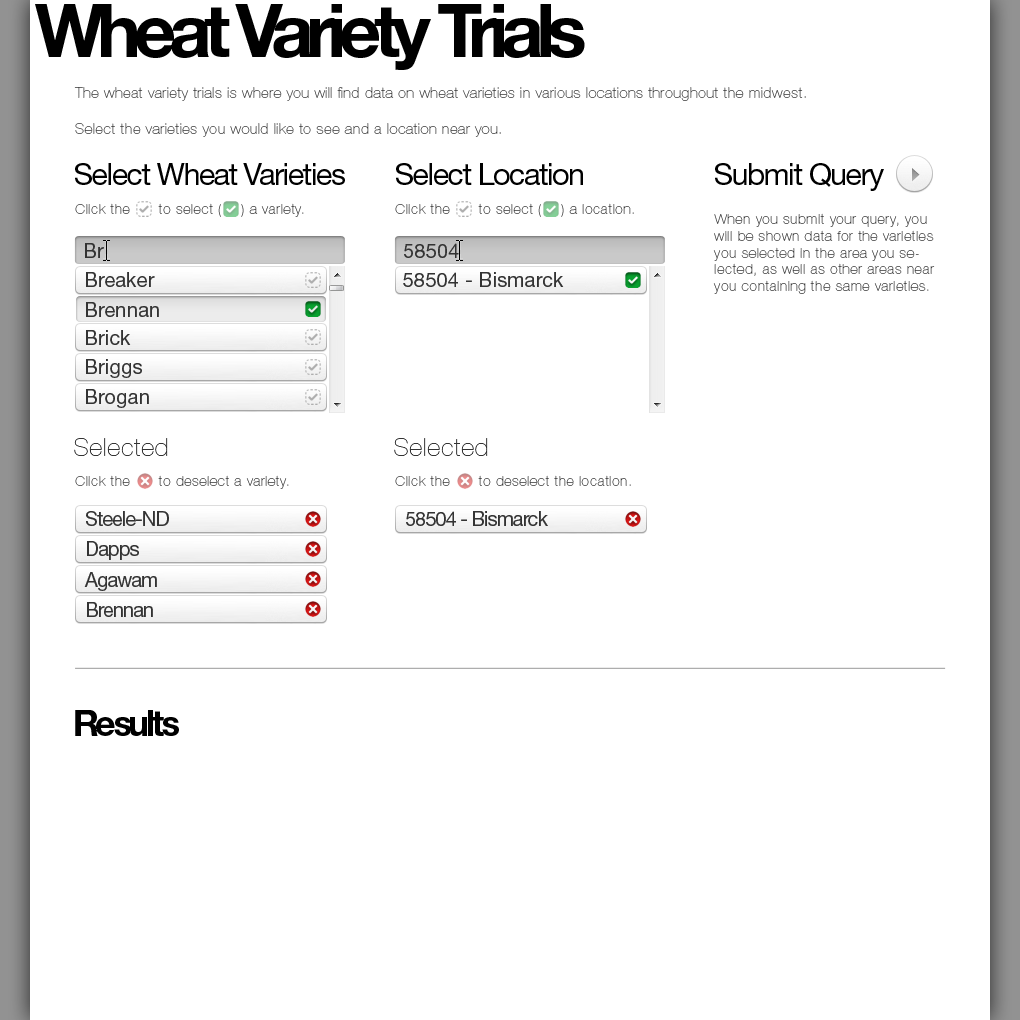
<style>
.page{position:relative;width:1020px;height:1020px;background:#ffffff}
.page>*{position:absolute;margin:0}
.t1{font:73.9px "HelveticaNeueLTStd-Bd";letter-spacing:-0.1em;color:#000000}
.t2{font:15px "HelveticaNeueLTStd-UltLt";letter-spacing:0.04em}
.t3{font:30.6px "HelveticaNeueLTStd-Roman";letter-spacing:-0.05em;color:#000000}
.t4{font:14px "HelveticaNeueLTStd-UltLt";letter-spacing:0.06em}
.t5{font:20px "HelveticaNeueLTStd-Roman";letter-spacing:0.01em;color:#333333}
.t6{font:25px "HelveticaNeueLTStd-UltLt";letter-spacing:0.04em;color:#333333}
.t7{font:20px "HelveticaNeueLTStd-Roman";letter-spacing:-0.05em;color:#333333}
.t8{font:36px "HelveticaNeueLTStd-Bd";letter-spacing:-0.1em;color:#000000}
</style>
<div class="page">
<p class="t1" style="left:35px;top:4px;width:550px;height:66px">Wheat Variety Trials</p>
<p class="t2" style="left:74px;top:87px;width:732px;height:50px">The wheat variety trials is where you will find data on wheat varieties in various locations throughout the midwest.<br><br>Select the varieties you would like to see and a location near you.</p>
<p class="t3" style="left:75px;top:163px;width:270px;height:22px">Select Wheat Varieties</p>
<p class="t3" style="left:396px;top:163px;width:187px;height:22px">Select Location</p>
<p class="t3" style="left:715px;top:163px;width:169px;height:28px">Submit Query</p>
<p class="t4" style="left:75px;top:203px;width:229px;height:14px">Click the      to select (    ) a variety.</p>
<p class="t4" style="left:395px;top:203px;width:239px;height:14px">Click the      to select (    ) a location.</p>
<p class="t4" style="left:713px;top:213px;width:222px;height:81px">When you submit your query, you will be shown data for the varieties you selected in the area you selected, as well as other areas near you containing the same varieties.</p>
<p class="t5" style="left:85px;top:243px;width:19px;height:15px">Br</p>
<p class="t5" style="left:404px;top:243px;width:55px;height:15px">58504</p>
<p class="t5" style="left:86px;top:272px;width:69px;height:15px">Breaker</p>
<p class="t5" style="left:403px;top:272px;width:161px;height:15px">58504 - Bismarck</p>
<p class="t5" style="left:86px;top:302px;width:73px;height:15px">Brennan</p>
<p class="t5" style="left:86px;top:330px;width:45px;height:15px">Brick</p>
<p class="t5" style="left:86px;top:359px;width:56px;height:19px">Briggs</p>
<p class="t5" style="left:86px;top:389px;width:63px;height:19px">Brogan</p>
<p class="t6" style="left:74px;top:438px;width:94px;height:18px">Selected</p>
<p class="t6" style="left:394px;top:438px;width:94px;height:18px">Selected</p>
<p class="t4" style="left:75px;top:475px;width:214px;height:14px">Click the      to deselect a variety.</p>
<p class="t4" style="left:395px;top:475px;width:236px;height:11px">Click the      to deselect the location.</p>
<p class="t7" style="left:86px;top:511px;width:83px;height:15px">Steele-ND</p>
<p class="t7" style="left:406px;top:511px;width:142px;height:15px">58504 - Bismarck</p>
<p class="t7" style="left:87px;top:541px;width:52px;height:19px">Dapps</p>
<p class="t7" style="left:84px;top:572px;width:73px;height:19px">Agawam</p>
<p class="t7" style="left:87px;top:602px;width:66px;height:15px">Brennan</p>
<p class="t8" style="left:75px;top:710px;width:104px;height:26px">Results</p>
</div>
